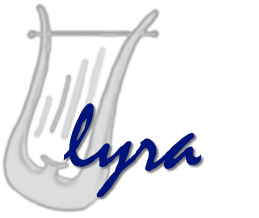
<style>
.page{position:relative;width:259px;height:218px;background:#ffffff}
.page>*{position:absolute;margin:0}
.t1{font:90px "MysticalPlain";color:#001479}
</style>
<div class="page">
<p class="t1" style="left:63px;top:103px;width:139px;height:95px">lyra</p>
</div>
